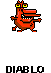
<style>
.page{position:relative;width:51px;height:73px;background:#ffffff}
.page>*{position:absolute;margin:0}
.t1{font:10.3px "Arial-BoldMT";color:#000000;scale:1.11 1}
</style>
<div class="page">
<p class="t1" style="left:6px;top:66px;width:38px;height:7px">DIABLO</p>
</div>
